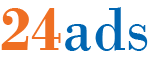
<style>
.page{position:relative;width:150px;height:60px;background:#ffffff}
.page>*{position:absolute;margin:0}
.t1{font:63.6px "BodoniMT";color:#0066b2}
.t2{font:63.6px "BodoniMT-Bold";color:#ef6f23}
</style>
<div class="page">
<p class="t1" style="left:1px;top:7px;width:147px;height:44px"><span class="t2">24</span>ads</p>
</div>
